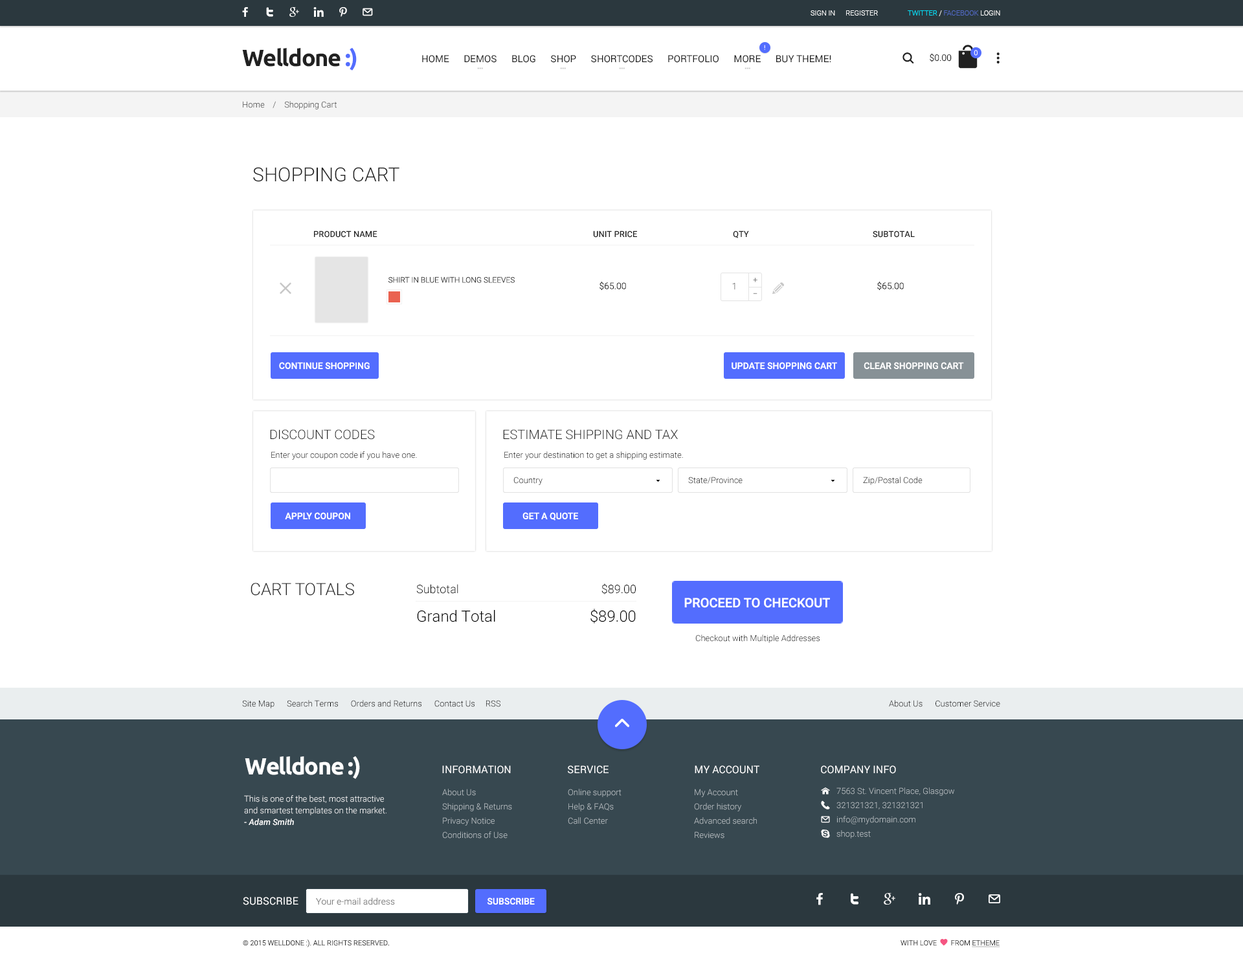
<style>
.page{position:relative;width:1243px;height:959px;background:#ffffff}
.page>*{position:absolute;margin:0}
.t1{font:7.1px "Roboto-Light";color:#ffffff}
.t2{font:7.1px "Roboto-Light";color:#526ac4}
.t3{font:7.1px "Roboto-Light";color:#00e4ff}
.t4{font:23.3px "Ubuntu-Bold";letter-spacing:-0.04em;color:#212121}
.t5{font:23.3px "Ubuntu-Bold";letter-spacing:-0.04em;color:#536dfe}
.t6{font:6.5px "Roboto-Regular"}
.t7{font:9.1px "Roboto-Light";color:#212121}
.t8{font:9.7px "Roboto-Regular";color:#212121}
.t9{font:8.4px "Roboto-Light";color:#2b2b2b}
.t10{font:19.4px "Roboto-Light";color:#212121;text-transform:uppercase}
.t11{font:8.4px "Roboto-Medium";color:#212121;text-transform:uppercase}
.t12{font:7.8px "Roboto-Light";color:#2b2b2b;text-transform:uppercase}
.t13{font:7.8px "MyriadPro-Regular";color:#7a7a7a}
.t14{font:9.1px "Roboto-Light"}
.t15{font:7.8px "MyriadPro-Regular"}
.t16{font:9.1px "Roboto-Medium";color:#ffffff;text-transform:uppercase}
.t17{font:13px "Roboto-Light";color:#212121}
.t18{font:8.4px "Roboto-Light";color:#000000}
.t19{font:8.4px "Roboto-Light"}
.t20{font:16.8px "Roboto-Light";color:#212121}
.t21{font:11.7px "Roboto-Light";color:#000000}
.t22{font:13px "Roboto-Medium";color:#ffffff;text-transform:uppercase}
.t23{font:15.5px "Roboto-Light";color:#000000}
.t24{font:23.3px "Ubuntu-Bold";letter-spacing:-0.04em;color:#ffffff}
.t25{font:10.4px "Roboto-Regular";color:#ffffff;text-transform:uppercase}
.t26{font:8.4px/11.7px "Roboto-Light";color:#ffffff}
.t27{font:8.4px/11.7px "Roboto-MediumItalic";color:#ffffff}
.t28{font:8.4px/14.2px "Roboto-Light";color:#bbc2c6}
.t29{font:9.1px "Roboto-Light";color:#848484}
.t30{font:7.1px "Roboto-Light";color:#2b2b2b;text-transform:uppercase}
</style>
<div class="page">
<p class="t1" style="left:811px;top:10px;width:67px;height:6px">SIGN IN      REGISTER</p>
<p class="t2" style="left:908px;top:10px;width:93px;height:6px"><span class="t3">TWITTER </span><span class="t1">/ </span>FACEBOOK <span class="t1">LOGIN</span></p>
<p class="t4" style="left:242px;top:47px;width:115px;height:24px">Welldone <span class="t5">:)</span></p>
<p class="t6" style="left:764px;top:45px;width:1px;height:5px">!</p>
<p class="t7" style="left:930px;top:53px;width:22px;height:9px">$0.00</p>
<p class="t1" style="left:974px;top:50px;width:4px;height:6px">0</p>
<p class="t8" style="left:422px;top:55px;width:409px;height:8px">HOME      DEMOS      BLOG      SHOP      SHORTCODES      PORTFOLIO      MORE      BUY THEME!</p>
<p class="t9" style="left:243px;top:101px;width:94px;height:8px">Home    /    Shopping Cart</p>
<p class="t10" style="left:253px;top:167px;width:147px;height:15px">Shopping cart</p>
<p class="t11" style="left:314px;top:231px;width:601px;height:7px">Product Name                                          Unit Price     Qty      Subtotal</p>
<p class="t12" style="left:389px;top:277px;width:126px;height:6px">Shirt In Blue With Long Sleeves</p>
<p class="t7" style="left:600px;top:282px;width:26px;height:8px">$65.00</p>
<p class="t13" style="left:753px;top:278px;width:5px;height:4px">+</p>
<p class="t7" style="left:877px;top:282px;width:27px;height:8px">$65.00</p>
<p class="t14" style="left:732px;top:283px;width:4px;height:6px">1</p>
<p class="t15" style="left:753px;top:293px;width:5px;height:1px">–</p>
<p class="t16" style="left:279px;top:362px;width:91px;height:7px">Continue Shopping</p>
<p class="t16" style="left:732px;top:362px;width:105px;height:7px">Update Shopping Cart</p>
<p class="t16" style="left:864px;top:362px;width:100px;height:7px">Clear Shopping Cart</p>
<p class="t17" style="left:270px;top:429px;width:105px;height:11px">DISCOUNT CODES</p>
<p class="t17" style="left:503px;top:429px;width:175px;height:11px">ESTIMATE SHIPPING AND TAX</p>
<p class="t18" style="left:271px;top:451px;width:146px;height:9px">Enter your coupon code if you have one.</p>
<p class="t18" style="left:504px;top:451px;width:179px;height:9px">Enter your destination to get a shipping estimate.</p>
<p class="t19" style="left:514px;top:477px;width:29px;height:8px">Country</p>
<p class="t18" style="left:688px;top:477px;width:55px;height:7px">State/Province</p>
<p class="t18" style="left:863px;top:477px;width:60px;height:8px">Zip/Postal Code</p>
<p class="t16" style="left:285px;top:512px;width:65px;height:7px">Apply Coupon</p>
<p class="t16" style="left:523px;top:512px;width:55px;height:9px">Get a Quote</p>
<p class="t20" style="left:251px;top:583px;width:103px;height:13px">CART TOTALS</p>
<p class="t21" style="left:416px;top:583px;width:220px;height:11px">Subtotal      $89.00</p>
<p class="t22" style="left:684px;top:598px;width:146px;height:10px">Proceed to checkout</p>
<p class="t23" style="left:417px;top:609px;width:219px;height:15px">Grand Total    $89.00</p>
<p class="t18" style="left:695px;top:635px;width:125px;height:8px">Checkout with Multiple Addresses</p>
<p class="t18" style="left:242px;top:700px;width:259px;height:8px">Site Map      Search Terms      Orders and Returns      Contact Us     RSS</p>
<p class="t18" style="left:889px;top:700px;width:112px;height:7px">About Us      Customer Service</p>
<p class="t24" style="left:245px;top:756px;width:115px;height:23px">Welldone :)</p>
<p class="t25" style="left:442px;top:765px;width:69px;height:9px">Information</p>
<p class="t25" style="left:568px;top:765px;width:41px;height:9px">service</p>
<p class="t25" style="left:695px;top:765px;width:65px;height:9px">My account</p>
<p class="t25" style="left:821px;top:765px;width:75px;height:9px">Company Info</p>
<p class="t26" style="left:244px;top:795px;width:143px;height:31px">This is one of the best, most attractive and smartest templates on the market. <br><span class="t27">- Adam Smith</span></p>
<p class="t28" style="left:442px;top:789px;width:70px;height:50px">About Us<br>Shipping &amp; Returns<br>Privacy Notice<br>Conditions of Use</p>
<p class="t28" style="left:568px;top:789px;width:54px;height:35px">Online support<br>Help &amp; FAQs<br>Call Center</p>
<p class="t28" style="left:694px;top:789px;width:63px;height:50px">My Account<br>Order history<br>Advanced search<br>Reviews</p>
<p class="t28" style="left:837px;top:787px;width:118px;height:52px">7563 St. Vincent Place, Glasgow<br>321321321, 321321321<br>info@mydomain.com<br>shop.test</p>
<p class="t25" style="left:243px;top:897px;width:56px;height:8px">Subscribe</p>
<p class="t29" style="left:316px;top:898px;width:79px;height:7px">Your e-mail address</p>
<p class="t16" style="left:487px;top:898px;width:48px;height:7px">SUBSCRIBE</p>
<p class="t30" style="left:243px;top:940px;width:146px;height:7px">© 2015 Welldone :). All Rights Reserved.</p>
</div>
